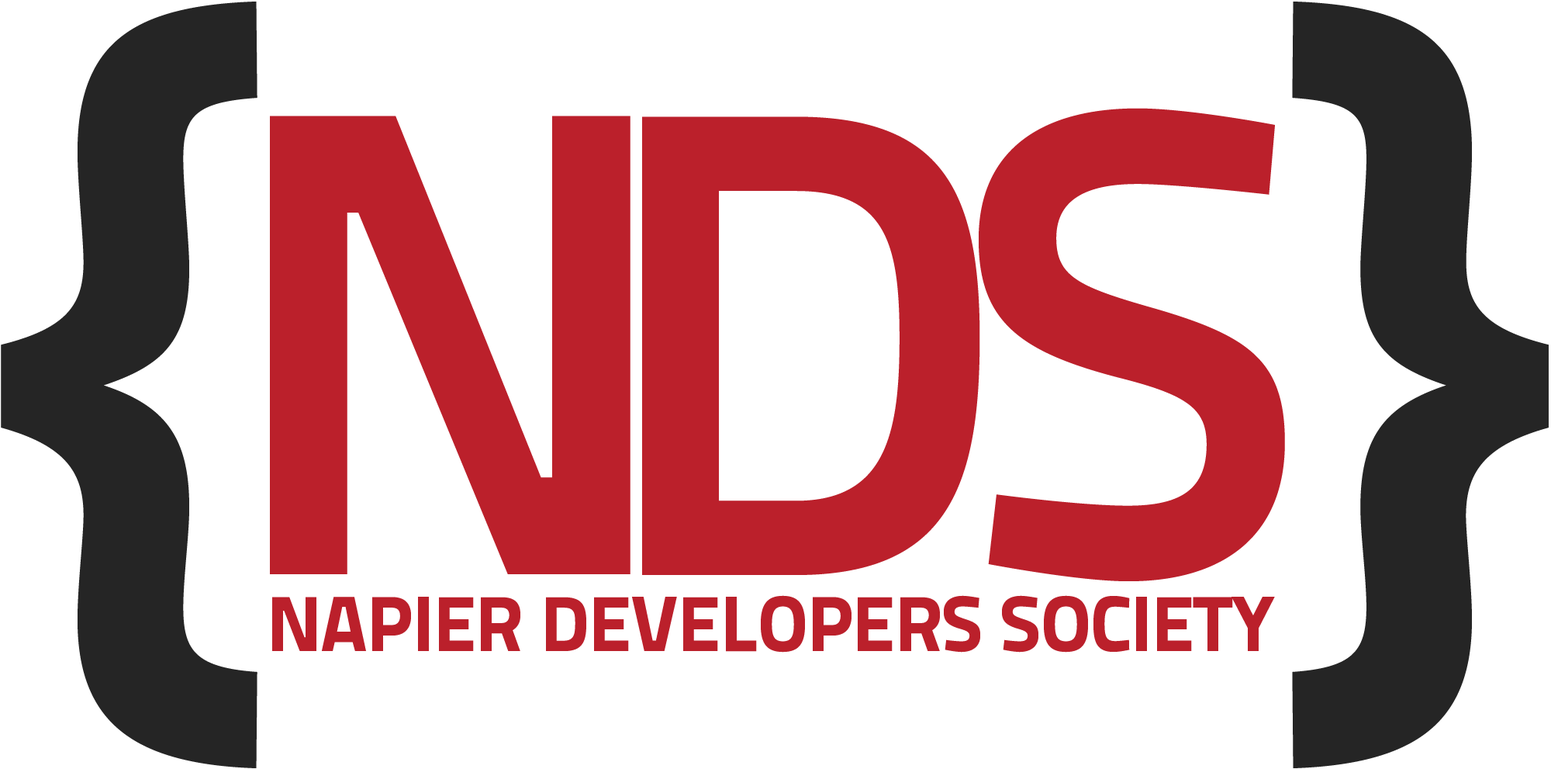
<style>
.page{position:relative;width:1551px;height:769px;background:#ffffff}
.page>*{position:absolute;margin:0}
.t1{font:859.9px "TitilliumText25L-800wt";color:#252525}
.t2{font:661.3px "TitilliumText25L-800wt";letter-spacing:-0.075em;color:#bb202b}
.t3{font:661.7px "TitilliumText25L-800wt";letter-spacing:-0.075em;color:#bb202b}
.t4{font:661.7px "TitilliumText25L-800wt";color:#bb202b}
.t5{font:78.2px "TitilliumText25L-999wt";letter-spacing:-0.01em;color:#bb202b}
</style>
<div class="page">
<p class="t1" style="left:1px;top:2px;width:1548px;height:766px">{     }</p>
<p class="t2" style="left:979px;top:108px;width:306px;height:473px">S</p>
<p class="t3" style="left:270px;top:116px;width:361px;height:458px">N</p>
<p class="t4" style="left:642px;top:116px;width:338px;height:459px">D</p>
<p class="t5" style="left:272px;top:595px;width:1003px;height:57px">NAPIER DEVELOPERS SOCIETY</p>
</div>
